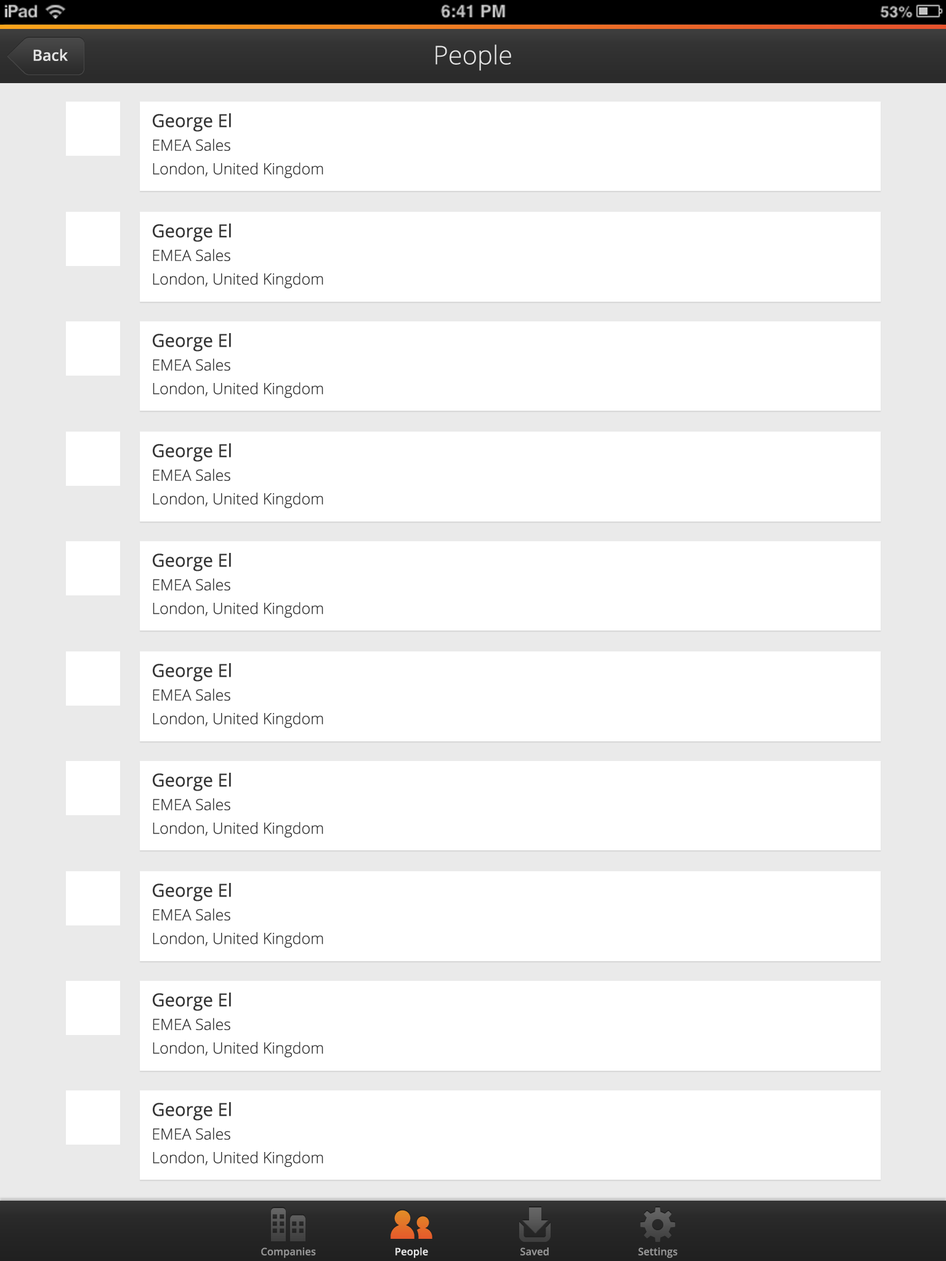
<style>
.page{position:relative;width:946px;height:1261px;background:#ffffff}
.page>*{position:absolute;margin:0}
.t1{font:15.4px "OpenSans-Semibold";color:#e5e5e5}
.t2{font:25.7px "OpenSans-Light";color:#e5e5e5}
.t3{font:15.4px "OpenSans-Light";color:#343434}
.t4{font:18px "OpenSans";color:#343434}
.t5{font:10.3px "OpenSans-Semibold";color:#969696}
.t6{font:10.3px "OpenSans-Semibold";color:#e5e5e5}
</style>
<div class="page">
<p class="t1" style="left:33px;top:49px;width:35px;height:12px">Back</p>
<p class="t2" style="left:435px;top:44px;width:76px;height:27px">People</p>
<p class="t3" style="left:153px;top:113px;width:170px;height:66px"><span class="t4">George El<br></span>EMEA Sales<br>London, United Kingdom</p>
<p class="t3" style="left:153px;top:223px;width:170px;height:66px"><span class="t4">George El<br></span>EMEA Sales<br>London, United Kingdom</p>
<p class="t3" style="left:153px;top:333px;width:170px;height:65px"><span class="t4">George El<br></span>EMEA Sales<br>London, United Kingdom</p>
<p class="t3" style="left:153px;top:443px;width:170px;height:66px"><span class="t4">George El<br></span>EMEA Sales<br>London, United Kingdom</p>
<p class="t3" style="left:153px;top:553px;width:170px;height:65px"><span class="t4">George El<br></span>EMEA Sales<br>London, United Kingdom</p>
<p class="t3" style="left:153px;top:663px;width:170px;height:65px"><span class="t4">George El<br></span>EMEA Sales<br>London, United Kingdom</p>
<p class="t3" style="left:153px;top:773px;width:170px;height:65px"><span class="t4">George El<br></span>EMEA Sales<br>London, United Kingdom</p>
<p class="t3" style="left:153px;top:883px;width:170px;height:65px"><span class="t4">George El<br></span>EMEA Sales<br>London, United Kingdom</p>
<p class="t3" style="left:153px;top:992px;width:170px;height:66px"><span class="t4">George El<br></span>EMEA Sales<br>London, United Kingdom</p>
<p class="t3" style="left:153px;top:1102px;width:170px;height:65px"><span class="t4">George El<br></span>EMEA Sales<br>London, United Kingdom</p>
<p class="t5" style="left:261px;top:1247px;width:55px;height:11px">Companies</p>
<p class="t6" style="left:395px;top:1247px;width:33px;height:11px">People</p>
<p class="t5" style="left:520px;top:1247px;width:29px;height:8px">Saved</p>
<p class="t5" style="left:638px;top:1247px;width:39px;height:11px">Settings</p>
</div>
